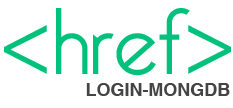
<style>
.page{position:relative;width:233px;height:108px;background:#ffffff}
.page>*{position:absolute;margin:0}
.t1{font:92.2px "BelleroseLight";color:#02c17c}
.t2{font:92.2px "MyriadPro-Regular";color:#02c17c}
.t3{font:18px "Helvetica-Bold";color:#444444;text-transform:uppercase}
</style>
<div class="page">
<p class="t1" style="left:4px;top:8px;width:227px;height:68px"><span class="t2">&lt;</span>href<span class="t2">&gt;</span></p>
<p class="t3" style="left:86px;top:83px;width:144px;height:13px">Login-Mongdb</p>
</div>
